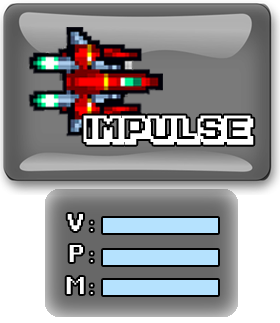
<style>
.page{position:relative;width:280px;height:323px}
.page>*{position:absolute;margin:0}
.t1{font:60px "Game-Over";color:#ffffff}
.t2{font:60px "Game-Over";color:#fefefe}
</style>
<div class="page">
<p class="t1" style="left:67px;top:214px;width:26px;height:17px">V :</p>
<p class="t2" style="left:69px;top:245px;width:24px;height:17px">P :</p>
<p class="t2" style="left:66px;top:277px;width:27px;height:17px">M :</p>
</div>
